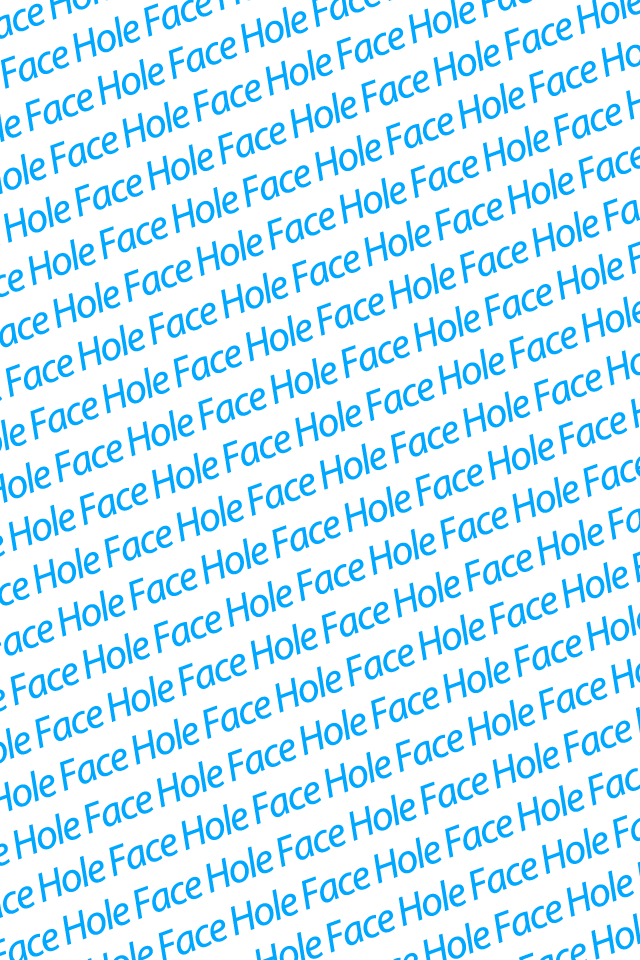
<style>
.page{position:relative;width:640px;height:960px;background:#ffffff}
.page>*{position:absolute;margin:0}
.t1{font:41.6px "MyriadPro-It";letter-spacing:-0.04em;color:#00a7ff}
</style>
<div class="page">
<p class="t1" style="left:0px;top:0px;width:640px;height:960px;rotate:-20deg">Face Hole Face Hole Face Hole Face Hole Face Hole Face Hole Face Hole Face Hole Face Hole Face Hole Face Hole Face Hole Face Hole Face Hole Face Hole Face Hole Face Hole Face Hole Face Hole Face Hole Face Hole Face Hole Face Hole Face Hole Face Hole Face Hole Face Hole Face Hole Face Hole Face Hole Face Hole Face Hole Face Hole Face Hole Face Hole Face Hole Face Hole Face Hole Face Hole Face Hole Face Hole Face Hole Face Hole Face Hole Face Hole Face Hole Face Hole Face Hole Face Hole Face Hole Face Hole Face Hole Face Hole Face Hole Face Hole Face Hole Face Hole Face Hole Face Hole Face Hole Face Hole Face Hole Face Hole Face Hole Face Hole Face Hole Face Hole Face Hole Face Hole Face Hole Face Hole Face Hole Face Hole Face Hole Face Hole Face Hole Face Hole Face Hole Face Hole Face Hole Face Hole Face Hole Face Hole Face Hole Face Hole Face Hole Face Hole Face Hole Face Hole Face Hole Face Hole Face Hole Face Hole Face Hole Face Hole Face Hole Face Hole Face Hole Face Hole Face Hole Face Hole Face Hole Face Hole Face Hole Face Hole Face Hole Face Hole Face Hole Face Hole Face Hole Face Hole Face Hole Face Hole Face Hole Face Hole Face Hole Face Hole Face Hole Face Hole Face Hole Face Hole Face Hole Face Hole Face Hole Face Hole Face Hole Face Hole Face Hole Face Hole Face Hole Face Hole Face Hole Face Hole Face Hole Face Hole Face Hole Face Hole Face Hole Face Hole Face Hole Face Hole Face Hole Face Hole Face Hole Face Hole Face Hole Face Hole Face Hole Face Hole Face Hole Face Hole Face Hole Face Hole Face Hole Face Hole Face Hole Face Hole Face Hole Face Hole Face Hole Face Hole Face Hole Face Hole Face Hole Face Hole Face Hole Face Hole Face Hole Face Hole Face Hole Face Hole Face Hole Face Hole Face Hole Face Hole Face Hole Face Hole Face Hole Face Hole Face Hole Face Hole Face Hole Face Hole Face Hole Face Hole Face Hole Face Hole Face Hole Face Hole Face Hole Face Hole Face Hole Face Hole Face Hole Face Hole Face Hole</p>
</div>
